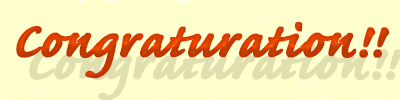
<style>
.page{position:relative;width:400px;height:100px;background:#ffffce}
.page>*{position:absolute;margin:0}
.t1{font:63.4px "CaflischScriptPro-Bold";color:#cf3b00;font-weight:bold}
</style>
<div class="page">
<p class="t1" style="left:16px;top:22px;width:374px;height:57px">Congraturation!!</p>
</div>
